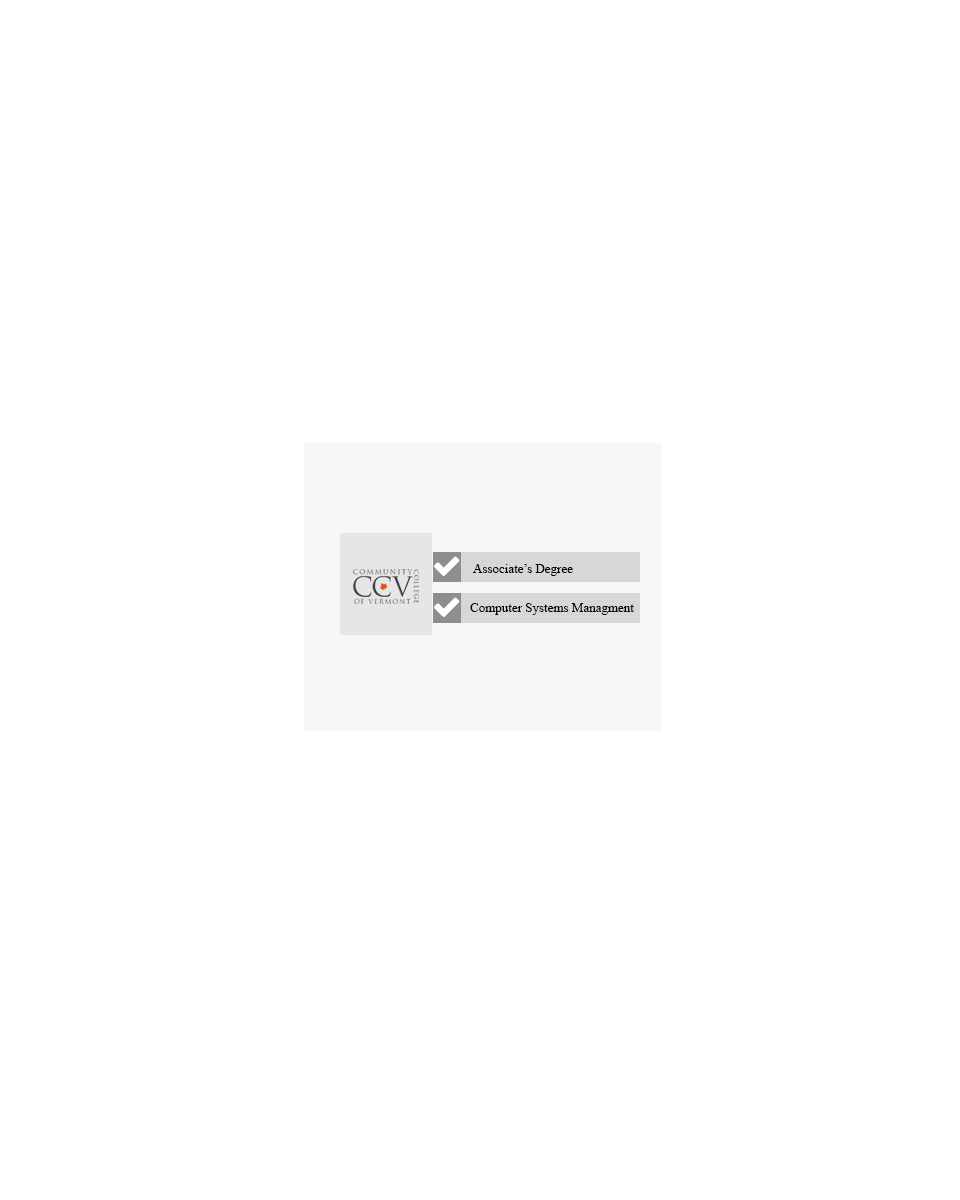
<style>
.page{position:relative;width:960px;height:1200px;background:#ffffff}
.page>*{position:absolute;margin:0}
.t1{font:13px "TimesNewRomanPSMT";color:#010101}
</style>
<div class="page">
<p class="t1" style="left:473px;top:564px;width:100px;height:12px">Associate’s Degree</p>
<p class="t1" style="left:470px;top:603px;width:164px;height:12px">Computer Systems Managment</p>
</div>
